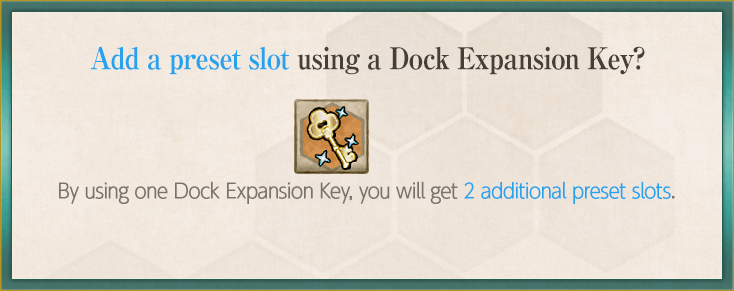
<style>
.page{position:relative;width:734px;height:291px}
.page>*{position:absolute;margin:0}
.t1{font:30px "RyuminPro-ExBold";letter-spacing:-0.04em;color:#463f38;scale:0.9 1}
.t2{font:30px "RyuminPro-ExBold";letter-spacing:-0.04em;color:#27a3ee;scale:0.9 1}
.t3{font:20px "UDShinGoPro-Light";letter-spacing:-0.04em;color:#79736c;font-weight:bold;scale:0.9 1}
.t4{font:20px "UDShinGoPro-Light";letter-spacing:-0.04em;color:#27a3ee;font-weight:bold;scale:0.9 1}
</style>
<div class="page">
<p class="t1" style="left:90px;top:46px;width:555px;height:29px"><span class="t2">Add a preset slot </span>using a Dock Expansion Key?</p>
<p class="t3" style="left:59px;top:181px;width:616px;height:23px">By using one Dock Expansion Key, you will get <span class="t4">2 additional preset slots</span>.</p>
</div>
